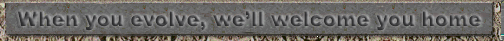
<style>
.page{position:relative;width:504px;height:41px}
.page>*{position:absolute;margin:0}
.t1{font:20px "Arial-Black"}
</style>
<div class="page">
<p class="t1" style="left:18px;top:11px;width:464px;height:20px">When you evolve, we’ll welcome you home</p>
</div>
